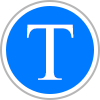
<style>
.page{position:relative;width:100px;height:100px;background:#007aff}
.page>*{position:absolute;margin:0}
.t1{font:83.3px "TimesNewRomanPSMT";letter-spacing:-0.01em;color:#ffffff}
</style>
<div class="page">
<p class="t1" style="left:27px;top:24px;width:47px;height:56px">T</p>
</div>
